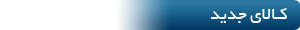
<style>
.page{position:relative;width:300px;height:30px;background:#ffffff}
.page>*{position:absolute;margin:0}
.t1{font:18.3px "BYekan";color:#ffffff}
</style>
<div class="page">
<p class="t1" style="left:211px;top:8px;width:76px;height:15px">کـالای جدید</p>
</div>
